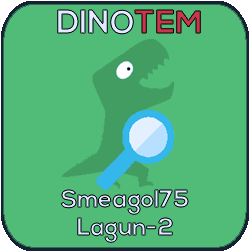
<style>
.page{position:relative;width:250px;height:251px;background:#51bc77}
.page>*{position:absolute;margin:0}
.t1{font:32px "NexaBold"}
.t2{font:24px "NexaBold"}
</style>
<div class="page">
<p class="t1" style="left:57px;top:10px;width:144px;height:24px">DINOTEM</p>
<p class="t2" style="left:61px;top:190px;width:127px;height:53px;text-align:center">Smeagol75<br>Lagun-2</p>
</div>
